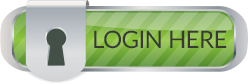
<style>
.page{position:relative;width:248px;height:84px;background:#ffffff}
.page>*{position:absolute;margin:0}
.t1{font:24px "Lato-Regular";letter-spacing:-0.025em;color:#393939}
</style>
<div class="page">
<p class="t1" style="left:94px;top:30px;width:133px;height:19px">LOGIN HERE</p>
</div>
